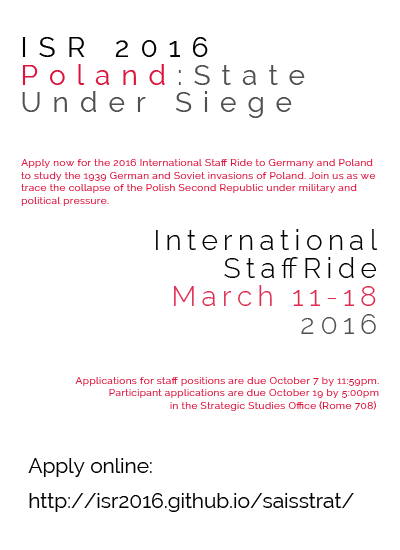
<style>
.page{position:relative;width:400px;height:550px;background:#ffffff}
.page>*{position:absolute;margin:0}
.t1{font:27.8px/27.8px "Raleway";letter-spacing:0.4em;color:#505050}
.t2{font:27.8px/27.8px "Raleway";letter-spacing:0.4em;color:#010101}
.t3{font:27.8px/27.8px "Raleway";letter-spacing:0.4em;color:#dc143c}
.t4{font:10.4px/12.5px "Raleway";letter-spacing:0.018em;color:#dc143c}
.t5{font:27.8px/27.8px "Raleway-Light";letter-spacing:0.2em;color:#020000}
.t6{font:27.8px/27.8px "Raleway-Light";letter-spacing:0.2em;color:#df2c50}
.t7{font:27.8px/27.8px "Raleway-Light";letter-spacing:0.2em;color:#505050}
.t8{font:20.8px/34.7px "Raleway";color:#010101}
</style>
<div class="page">
<p class="t1" style="left:22px;top:37px;width:283px;height:81px"><span class="t2">ISR 2016<br></span><span class="t3">Poland</span>:State<br>Under Siege</p>
<p class="t4" style="left:21px;top:159px;width:355px;height:47px">Apply now for the 2016 International Staff Ride to Germany and Poland <br>to study the 1939 German and Soviet invasions of Poland. Join us as we<br>trace the collapse of the Polish Second Republic under military and <br>political pressure.</p>
<p class="t5" style="left:156px;top:229px;width:222px;height:105px;text-align:right"><span class="t3"><br></span>International<br>StaffRide<br><span class="t6">March 11-18<br></span><span class="t7">2016</span></p>
<p class="t4" style="left:75px;top:377px;width:304px;height:34px;text-align:right">Applications for staff positions are due October 7 by 11:59pm.<br>Participant applications are due October 19 by 5:00pm<br> in the Strategic Studies Office (Rome 708)</p>
<p class="t8" style="left:28px;top:458px;width:326px;height:54px">Apply online:<br>http://isr2016.github.io/saisstrat/</p>
</div>
